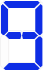
<style>
.page{position:relative;width:43px;height:70px;background:#ffffff}
.page>*{position:absolute;margin:0}
.t1{font:90px "DigitalCounter7";letter-spacing:0.075em;color:#0e2de5;text-transform:uppercase}
.t2{font:88px "DigitalCounter7";letter-spacing:0.075em;color:#0e2de5;text-transform:uppercase}
</style>
<div class="page">
<p class="t1" style="left:1px;top:0px;width:42px;height:70px">8</p>
<p class="t2" style="left:1px;top:1px;width:42px;height:69px">9</p>
</div>
